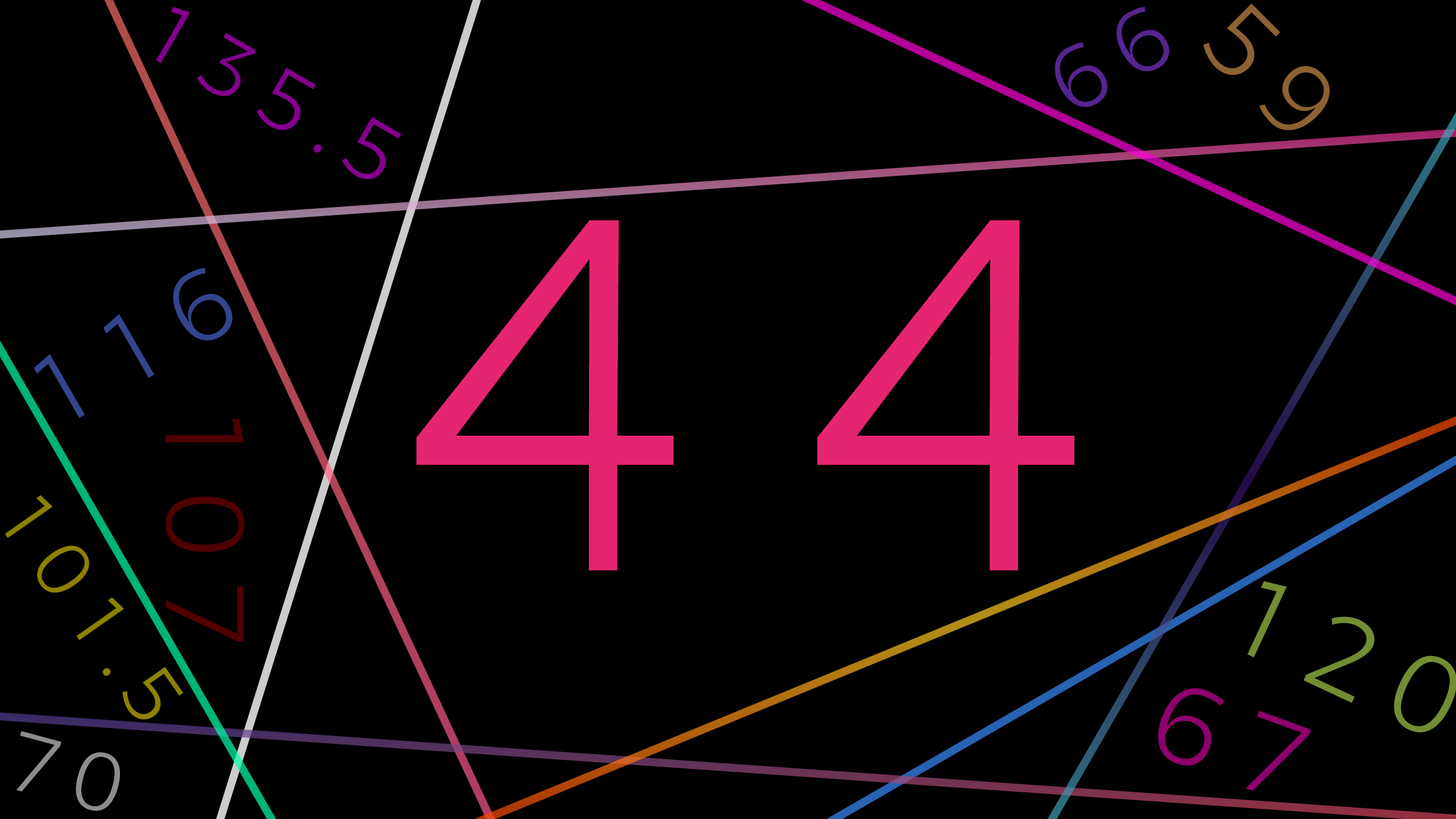
<style>
.page{position:relative;width:1456px;height:819px;background:#000000}
.page>*{position:absolute;margin:0}
.t1{font:102.4px "Harfash";letter-spacing:0.2em;color:#8d6233}
.t2{font:85.3px "Harfash";letter-spacing:0.2em;color:#84008d}
.t3{font:91px "Harfash";letter-spacing:0.2em;color:#55258d}
.t4{font:511.9px "Harfash";letter-spacing:0.2em;color:#e62572}
.t5{font:102.4px "Harfash";letter-spacing:0.2em;color:#34448d}
.t6{font:113.7px "Harfash";letter-spacing:0.2em;color:#500000}
.t7{font:79.6px "Harfash";letter-spacing:0.2em;color:#8d8100}
.t8{font:113.7px "Harfash";letter-spacing:0.2em;color:#728d33}
.t9{font:113.7px "Harfash";letter-spacing:0.2em;color:#8d006c}
.t10{font:85.3px "Harfash";letter-spacing:0.2em;color:#8d8d8d}
</style>
<div class="page">
<p class="t1" style="left:1203px;top:3px;width:127px;height:127px;rotate:45deg">59</p>
<p class="t2" style="left:156px;top:7px;width:246px;height:172px;rotate:30deg">135.5</p>
<p class="t3" style="left:1054px;top:7px;width:115px;height:100px;rotate:-30deg">66</p>
<p class="t4" style="left:416px;top:220px;width:658px;height:350px">44</p>
<p class="t5" style="left:34px;top:268px;width:199px;height:150px;rotate:-30deg">116</p>
<p class="t6" style="left:166px;top:419px;width:79px;height:223px;rotate:90deg">107</p>
<p class="t7" style="left:5px;top:495px;width:178px;height:224px;rotate:55deg">101.5</p>
<p class="t8" style="left:1247px;top:581px;width:210px;height:152px;rotate:25deg">120</p>
<p class="t9" style="left:1158px;top:688px;width:153px;height:103px;rotate:20deg">67</p>
<p class="t10" style="left:16px;top:731px;width:104px;height:80px;rotate:15deg">70</p>
</div>
